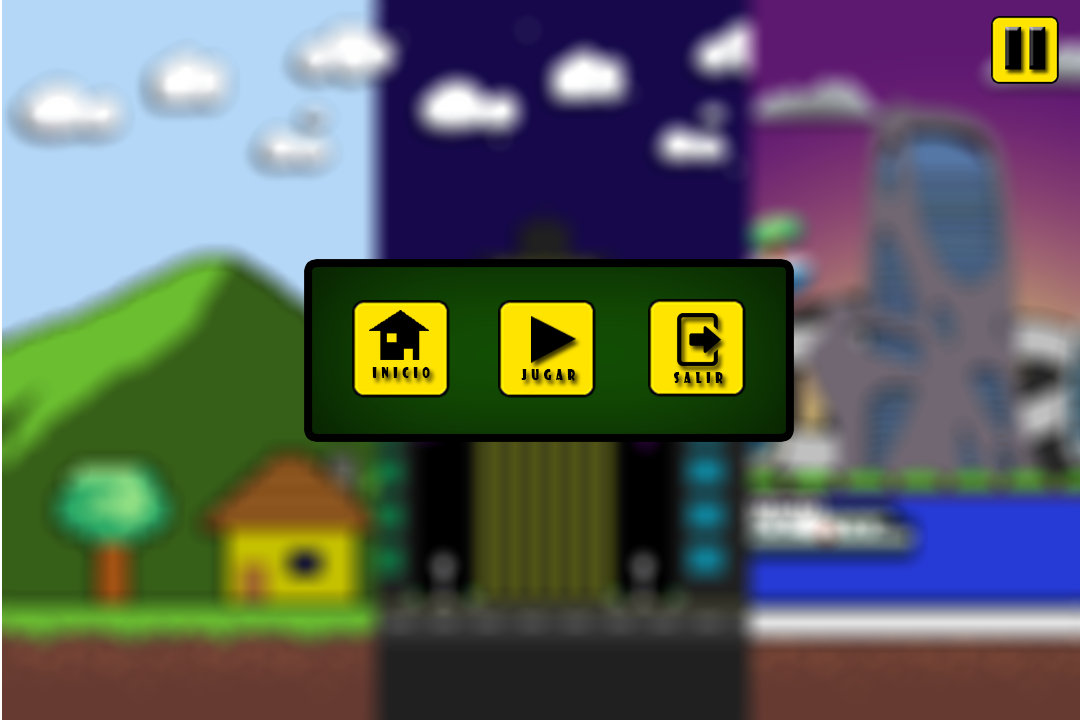
<style>
.page{position:relative;width:1080px;height:720px}
.page>*{position:absolute;margin:0}
.t1{font:15.4px "ShowcardGothic-Reg";letter-spacing:0.4em;color:#000000;scale:0.74 1}
</style>
<div class="page">
<p class="t1" style="left:372px;top:367px;width:58px;height:11px">Inicio</p>
<p class="t1" style="left:521px;top:369px;width:54px;height:12px">jugar</p>
<p class="t1" style="left:674px;top:372px;width:49px;height:12px">salir</p>
</div>
